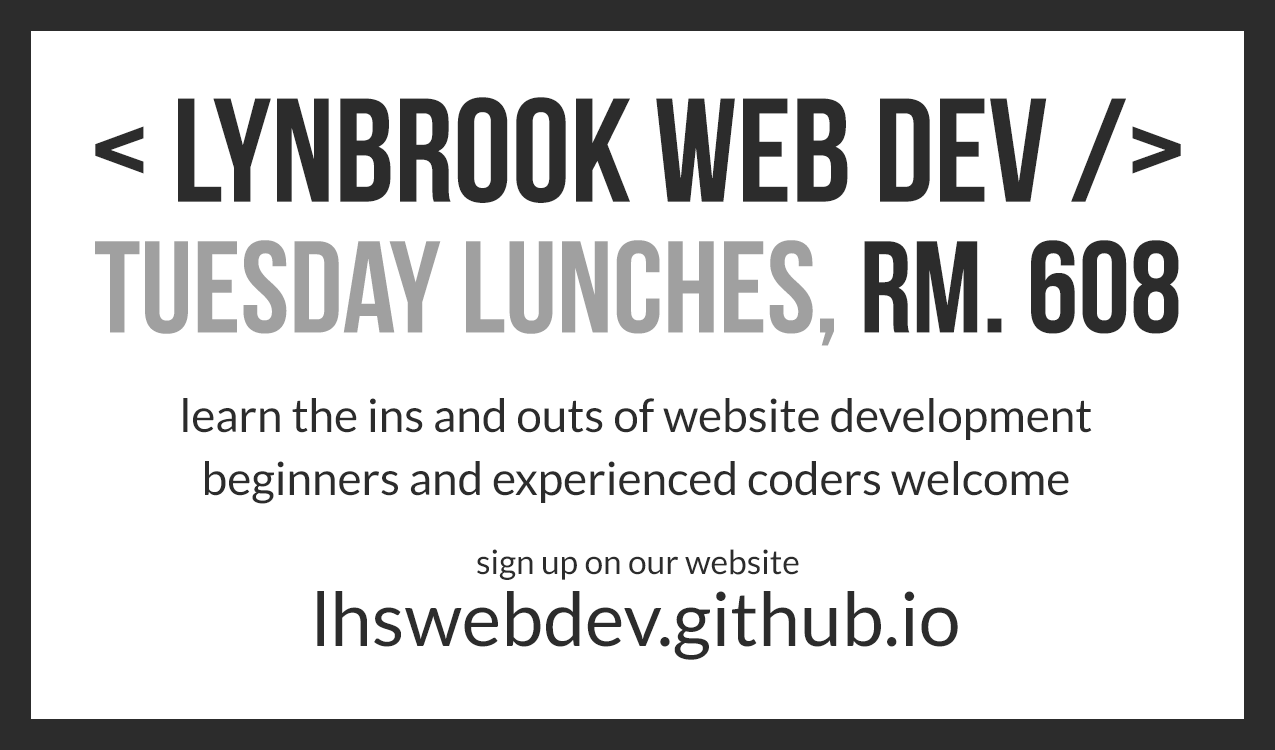
<style>
.page{position:relative;width:1275px;height:750px;background:#ffffff}
.page>*{position:absolute;margin:0}
.t1{font:147.2px/130.9px "BebasNeue";color:#2c2c2c}
.t2{font:130.3px/130.9px "BebasNeue";color:#a0a0a0}
.t3{font:130.3px/130.9px "BebasNeue";color:#2c2c2c}
.t4{font:45.9px/63px "Lato-Regular";color:#2c2c2c}
.t5{font:33.4px "Lato-Regular";color:#2c2c2c}
.t6{font:75px "Lato-Regular";color:#2c2c2c}
</style>
<div class="page">
<p class="t1" style="left:95px;top:97px;width:1086px;height:249px;text-align:center">&lt; lynbrook web dev /&gt;<br><span class="t2">tuesday lunches, </span><span class="t3">rm. 608</span></p>
<p class="t4" style="left:183px;top:398px;width:909px;height:106px;text-align:center">learn the ins and outs of website development<br>beginners and experienced coders welcome</p>
<p class="t5" style="left:477px;top:549px;width:322px;height:31px">sign up on our website</p>
<p class="t6" style="left:317px;top:591px;width:641px;height:69px">lhswebdev.github.io</p>
</div>
